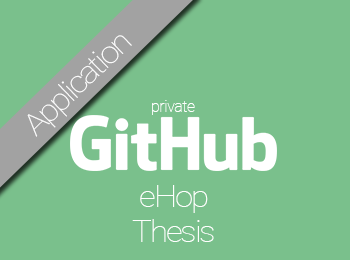
<style>
.page{position:relative;width:350px;height:260px;background:#7ac08c}
.page>*{position:absolute;margin:0}
.t1{font:30.2px "Roboto-Thin";letter-spacing:-0.07em;color:#ffffff;scale:1.11 1}
.t2{font:15.6px "Roboto-Thin";letter-spacing:-0.025em;color:#ffffff}
.t3{font:30.2px/35px "Roboto-Thin";letter-spacing:-0.07em;color:#ffffff;scale:1.11 1}
</style>
<div class="page">
<p class="t1" style="left:27px;top:35px;width:105px;height:102px;rotate:-44deg">Application</p>
<p class="t2" style="left:152px;top:100px;width:43px;height:15px">private</p>
<p class="t3" style="left:132px;top:185px;width:82px;height:57px;text-align:center">eHop<br>Thesis</p>
</div>
